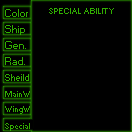
<style>
.page{position:relative;width:132px;height:132px;background:#000000}
.page>*{position:absolute;margin:0}
.t1{font:10px "Small Fonts";color:#31af00}
.t2{font:8px "Small Fonts";color:#31af00}
.t3{font:9px "Small Fonts";color:#31af00}
</style>
<div class="page">
<p class="t1" style="left:5px;top:9px;width:23px;height:8px">Color</p>
<p class="t2" style="left:49px;top:8px;width:65px;height:6px">SPECIAL ABILITY</p>
<p class="t1" style="left:5px;top:25px;width:20px;height:10px">Ship</p>
<p class="t1" style="left:5px;top:41px;width:21px;height:8px">Gen.</p>
<p class="t1" style="left:5px;top:57px;width:20px;height:8px">Rad.</p>
<p class="t3" style="left:5px;top:74px;width:24px;height:7px">Sheild</p>
<p class="t2" style="left:5px;top:91px;width:25px;height:6px">MainW</p>
<p class="t2" style="left:5px;top:123px;width:25px;height:8px">Special</p>
</div>
